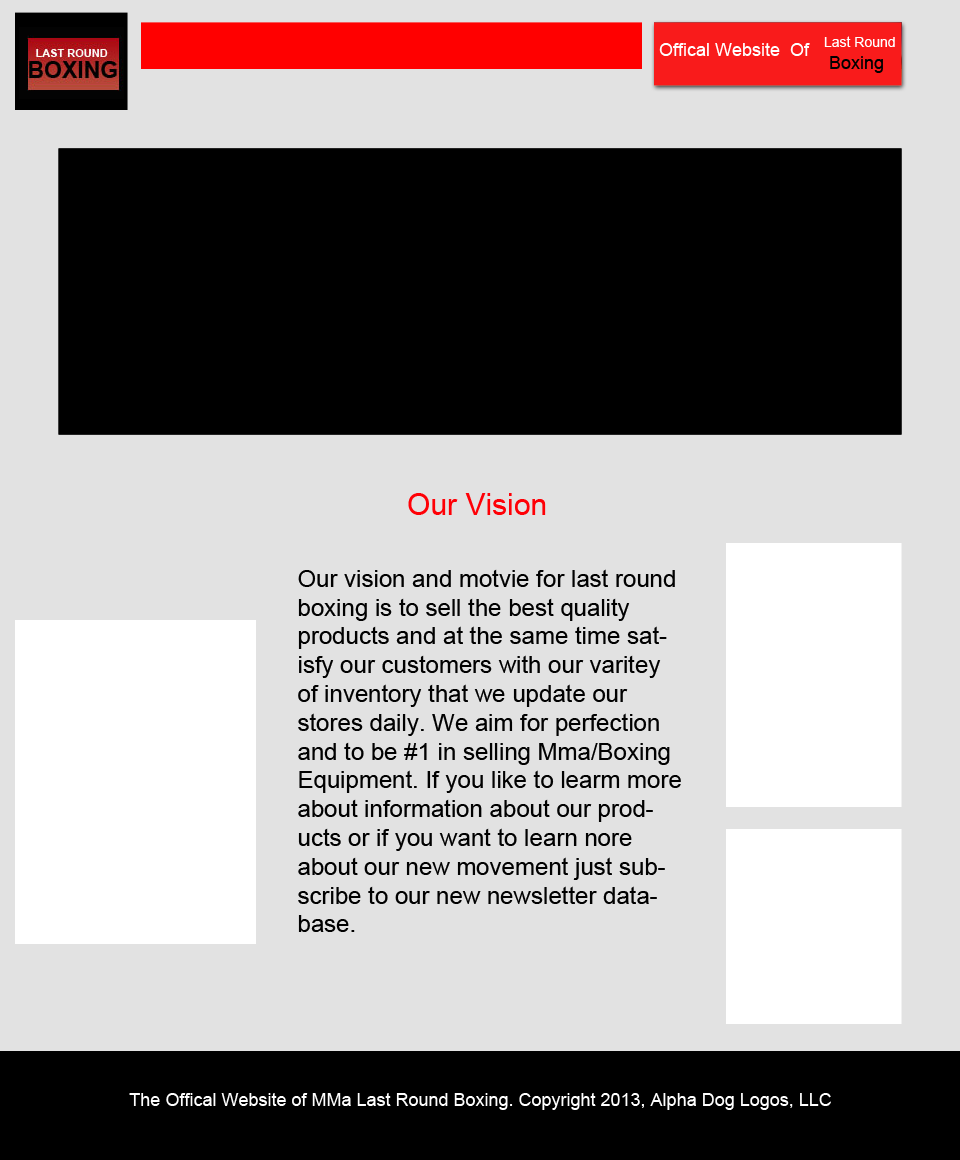
<style>
.page{position:relative;width:960px;height:1160px;background:#e2e2e2}
.page>*{position:absolute;margin:0}
.t1{font:14px "ArialMT";color:#ffffff}
.t2{font:18px "ArialMT";color:#000000}
.t3{font:18px "ArialMT";color:#ffffff}
.t4{font:30px "ArialMT";color:#ff0006}
.t5{font:24px "ArialMT";color:#010101}
.t6{font:18px "ArialMT";color:#fefefe}
</style>
<div class="page">
<p class="t1" style="left:824px;top:36px;width:71px;height:37px">Last Round<br><span class="t2"> Boxing</span></p>
<p class="t3" style="left:659px;top:43px;width:151px;height:13px">Offical Website  Of</p>
<p class="t4" style="left:408px;top:493px;width:138px;height:22px">Our Vision</p>
<p class="t5" style="left:298px;top:569px;width:383px;height:363px">Our vision and motvie for last round boxing is to sell the best quality products and at the same time satisfy our customers with our varitey of inventory that we update our stores daily. We aim for perfection and to be #1 in selling Mma/Boxing Equipment. If you like to learm more about information about our products or if you want to learn nore about our new movement just subscribe to our new newsletter database.</p>
<p class="t6" style="left:129px;top:1093px;width:702px;height:17px">The Offical Website of MMa Last Round Boxing. Copyright 2013, Alpha Dog Logos, LLC</p>
</div>
